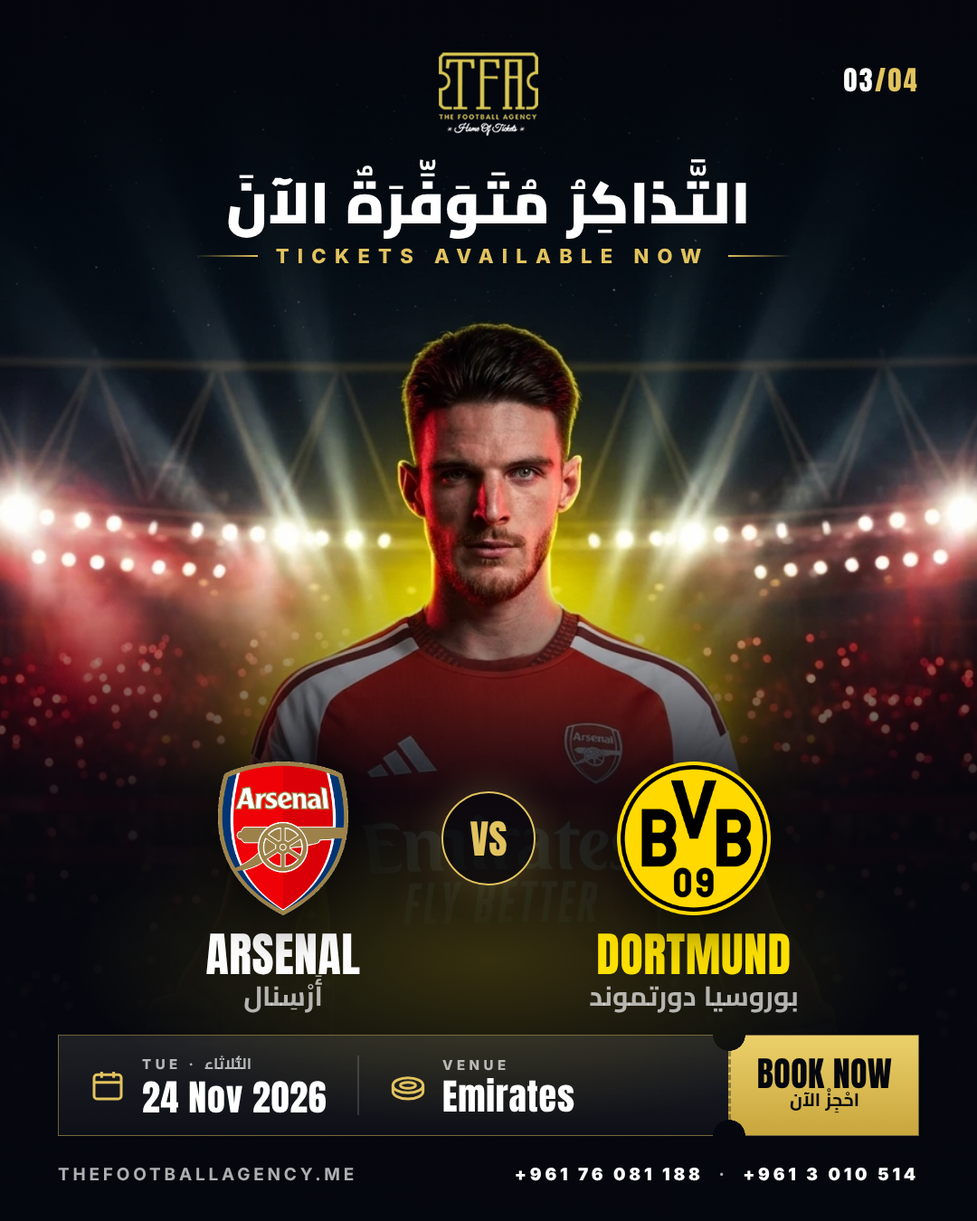
<style>
.page{position:relative;width:977px;height:1221px}
.page>*{position:absolute;margin:0}
.t1{font:27.1px "Anton-Regular";letter-spacing:0.08em;color:#e2c35f}
.t2{font:27.1px "Anton-Regular";letter-spacing:0.08em;color:#ffffff}
.t3{font:57.9px "Cairo-Black";color:#ffffff}
.t4{font:19.9px "Inter-ExtraBold";letter-spacing:0.42em;color:#e2c35f}
.t5{font:39.8px "Anton-Regular";color:#e2c35f}
.t6{font:47px "Anton-Regular";letter-spacing:0.01em;color:#ffffff}
.t7{font:47px "Anton-Regular";letter-spacing:0.01em;color:#fde100}
.t8{font:27.1px "Cairo-Bold"}
.t9{font:15.4px "Cairo-Bold"}
.t10{font:13.6px "Inter-ExtraBold";letter-spacing:0.3em}
.t11{font:34.4px "Anton-Regular";letter-spacing:0.01em;color:#05070e}
.t12{font:36.2px "Anton-Regular";letter-spacing:0.02em;color:#ffffff}
.t13{font:18.1px "Cairo-Bold";color:#05070e}
.t14{font:17.2px "Inter-Bold";letter-spacing:0.2em}
.t15{font:17.2px "Inter-ExtraBold";letter-spacing:0.2em;color:#ffffff}
.t16{font:17.2px "Inter-Bold";letter-spacing:0.2em;color:#ffffff}
</style>
<div class="page">
<p class="t1" style="left:844px;top:68px;width:73px;height:24px"><span class="t2">03</span>/04</p>
<p class="t3" style="left:228px;top:159px;width:518px;height:80px">التَّذاكِرُ مُتَوَفِّرَةٌ الآنَ</p>
<p class="t4" style="left:276px;top:248px;width:425px;height:16px">TICKETS AVAILABLE NOW</p>
<p class="t5" style="left:470px;top:820px;width:36px;height:36px">VS</p>
<p class="t6" style="left:206px;top:933px;width:154px;height:42px">ARSENAL</p>
<p class="t7" style="left:598px;top:933px;width:192px;height:42px">DORTMUND</p>
<p class="t8" style="left:244px;top:975px;width:78px;height:38px">أَرْسِنال</p>
<p class="t8" style="left:590px;top:986px;width:207px;height:27px">بوروسيا دورتموند</p>
<p class="t9" style="left:142px;top:1055px;width:109px;height:15px"><span class="t10">TUE · </span>الثُّلاثاء</p>
<p class="t10" style="left:442px;top:1060px;width:64px;height:11px">VENUE</p>
<p class="t11" style="left:758px;top:1058px;width:134px;height:31px">BOOK NOW</p>
<p class="t12" style="left:143px;top:1081px;width:183px;height:32px">24 Nov 2026</p>
<p class="t12" style="left:443px;top:1078px;width:131px;height:34px">Emirates</p>
<p class="t13" style="left:790px;top:1088px;width:68px;height:25px">احْجِزْ الآن</p>
<p class="t14" style="left:58px;top:1168px;width:296px;height:13px">THEFOOTBALLAGENCY.ME</p>
<p class="t15" style="left:515px;top:1168px;width:400px;height:13px">+961 76 081 188<span class="t16">  ·  </span>+961 3 010 514</p>
</div>
